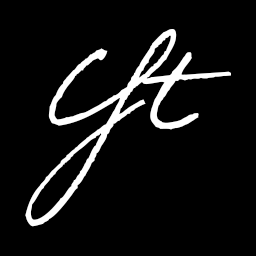
<style>
.page{position:relative;width:256px;height:256px;background:#000000}
.page>*{position:absolute;margin:0}
.t1{font:126.4px "AdobeHandwriting-Ernie";color:#ffffff}
</style>
<div class="page">
<p class="t1" style="left:25px;top:29px;width:206px;height:198px">Yt</p>
</div>
